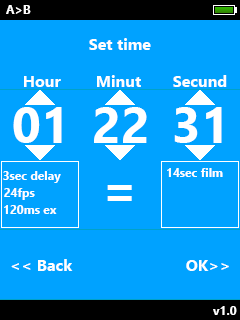
<style>
.page{position:relative;width:240px;height:320px;background:#00a2ff}
.page>*{position:absolute;margin:0}
.t1{font:12px "NirmalaUI-Bold";color:#ffffff}
.t2{font:16px "NirmalaUI-Bold";color:#ffffff}
.t3{font:50px "NirmalaUI-Bold";color:#ffffff}
</style>
<div class="page">
<p class="t1" style="left:6px;top:5px;width:25px;height:9px">A&gt;B</p>
<p class="t2" style="left:89px;top:38px;width:62px;height:12px">Set time</p>
<p class="t2" style="left:24px;top:76px;width:37px;height:11px">Hour</p>
<p class="t2" style="left:97px;top:75px;width:44px;height:12px">Minut</p>
<p class="t2" style="left:173px;top:75px;width:54px;height:12px">Secund</p>
<p class="t3" style="left:13px;top:107px;width:49px;height:36px">01</p>
<p class="t3" style="left:94px;top:107px;width:53px;height:36px">22</p>
<p class="t3" style="left:174px;top:107px;width:48px;height:36px">31</p>
<p class="t1" style="left:3px;top:171px;width:58px;height:12px">3sec delay</p>
<p class="t1" style="left:167px;top:168px;width:56px;height:9px">14sec film</p>
<p class="t3" style="left:107px;top:185px;width:25px;height:16px">=</p>
<p class="t1" style="left:4px;top:188px;width:31px;height:12px">24fps</p>
<p class="t1" style="left:4px;top:205px;width:53px;height:9px">120ms ex</p>
<p class="t2" style="left:11px;top:259px;width:62px;height:12px">&lt;&lt; Back</p>
<p class="t2" style="left:186px;top:260px;width:43px;height:11px">OK&gt;&gt;</p>
<p class="t1" style="left:213px;top:306px;width:24px;height:9px">v1.0</p>
</div>
